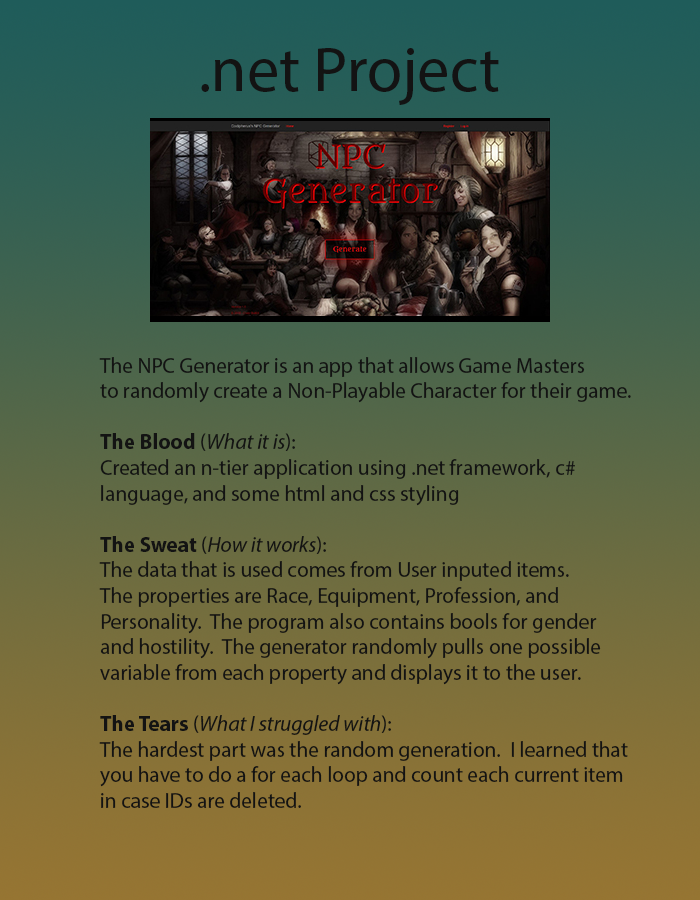
<style>
.page{position:relative;width:700px;height:900px}
.page>*{position:absolute;margin:0}
.t1{font:64px "MyriadPro-Regular";color:#131313}
.t2{font:21.3px "MyriadPro-Regular";color:#131313}
.t3{font:21.3px "MyriadPro-Bold";color:#131313}
.t4{font:21.3px "MyriadPro-It";color:#131313}
</style>
<div class="page">
<p class="t1" style="left:201px;top:48px;width:298px;height:57px">.net Project</p>
<p class="t2" style="left:99px;top:357px;width:532px;height:451px">The NPC Generator is an app that allows Game Masters<br>to randomly create a Non-Playable Character for their game.<br><br><span class="t3">The Blood</span> (<span class="t4">What it is</span>):<br>Created an n-tier application using .net framework, c# <br>language, and some html and css styling<br><br><span class="t3">The Sweat</span> (<span class="t4">How it works</span>):<br>The data that is used comes from User inputed items.<br>The properties are Race, Equipment, Profession, and <br>Personality.  The program also contains bools for gender<br>and hostility.  The generator randomly pulls one possible <br>variable from each property and displays it to the user.<br><br><span class="t3">The Tears</span> (<span class="t4">What I struggled with</span>):<br>The hardest part was the random generation.  I learned that <br>you have to do a for each loop and count each current item <br>in case IDs are deleted.</p>
</div>
